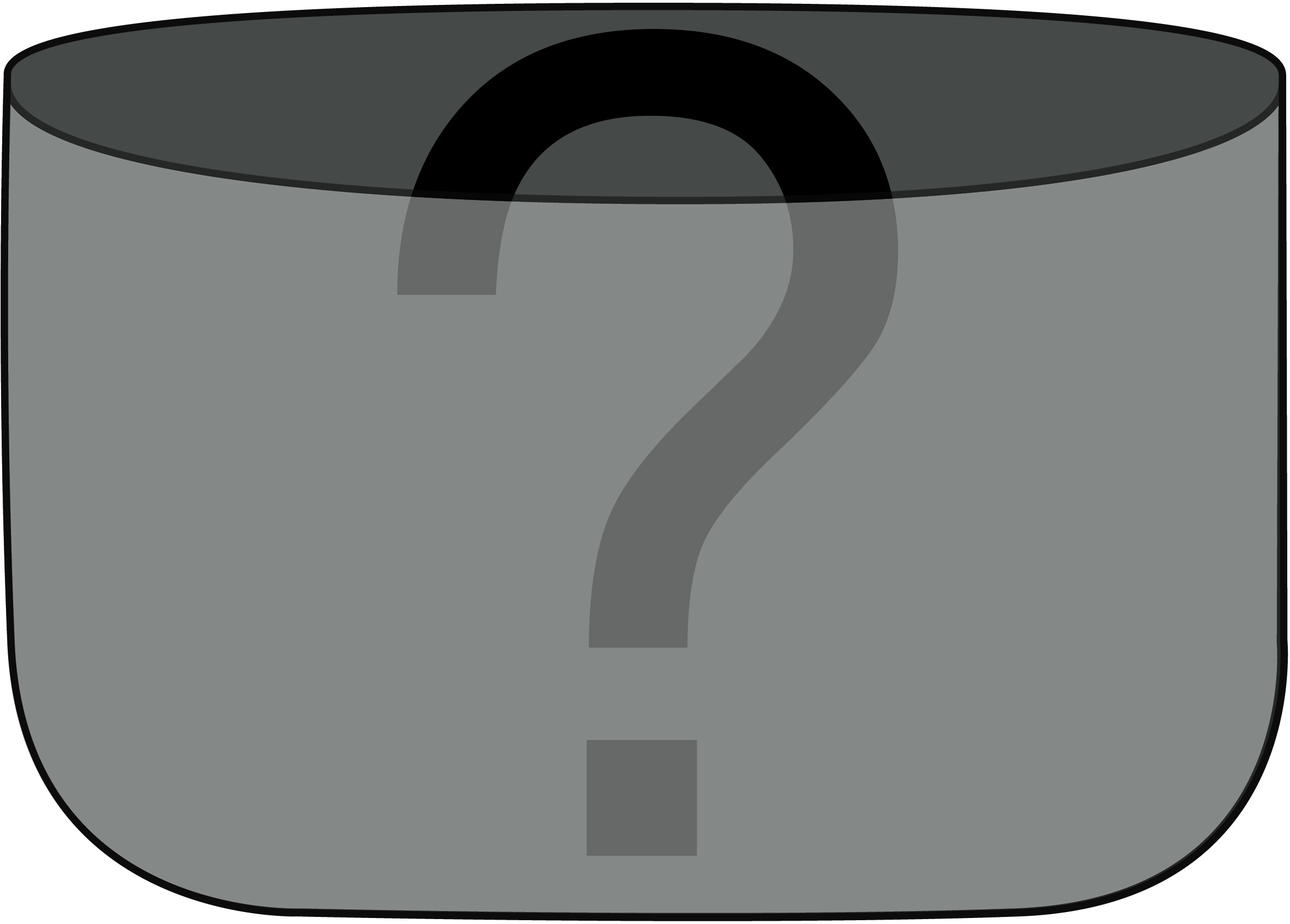
<style>
.page{position:relative;width:1290px;height:924px;background:#848987}
.page>*{position:absolute;margin:0}
.t1{font:1137.7px "Helvetica"}
</style>
<div class="page">
<p class="t1" style="left:397px;top:29px;width:502px;height:827px">?</p>
</div>
